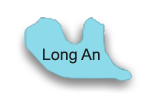
<style>
.page{position:relative;width:150px;height:100px;background:#ffffff}
.page>*{position:absolute;margin:0}
.t1{font:16px "ArialMT";color:#222222}
</style>
<div class="page">
<p class="t1" style="left:43px;top:48px;width:57px;height:16px">Long An</p>
</div>
